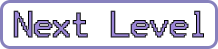
<style>
.page{position:relative;width:218px;height:49px;background:#ffffff}
.page>*{position:absolute;margin:0}
.t1{font:30px "Terminal";letter-spacing:-0.07em;font-weight:bold;scale:0.95 1}
</style>
<div class="page">
<p class="t1" style="left:13px;top:10px;width:191px;height:28px">Next Level</p>
</div>
